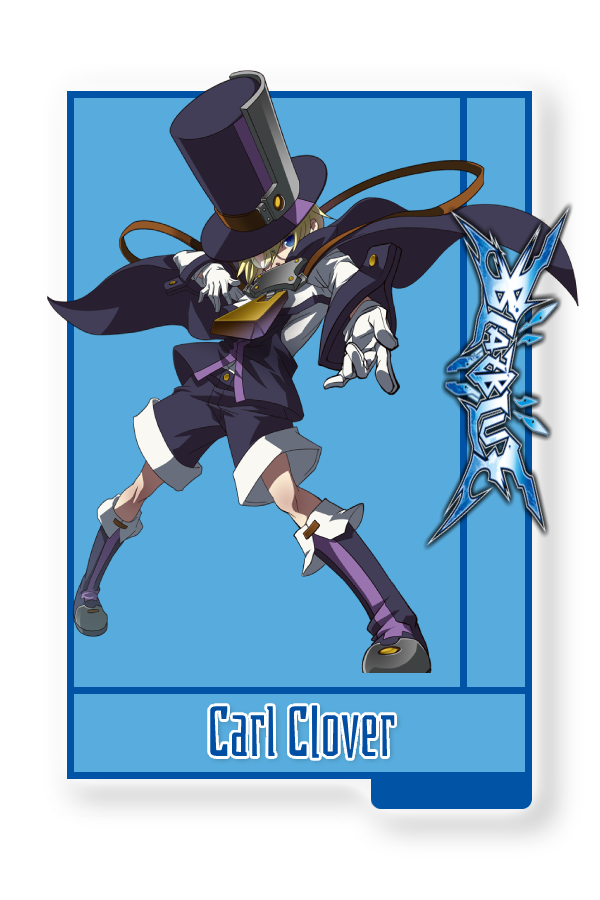
<style>
.page{position:relative;width:600px;height:900px;background:#58acdd}
.page>*{position:absolute;margin:0}
.t1{font:70px "Bahianita-Regular";color:#004fa2}
</style>
<div class="page">
<p class="t1" style="left:210px;top:705px;width:185px;height:53px">Carl Clover</p>
</div>
